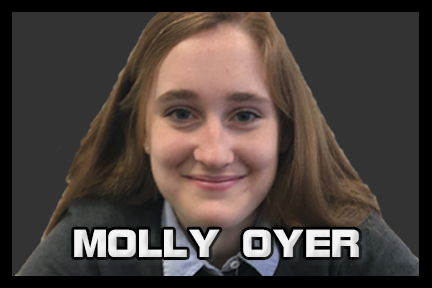
<style>
.page{position:relative;width:432px;height:288px;background:#333333}
.page>*{position:absolute;margin:0}
.t1{font:41.7px "BolsterBold";color:#f3f3f3}
</style>
<div class="page">
<p class="t1" style="left:74px;top:229px;width:285px;height:28px">MOLLY OYER</p>
</div>
